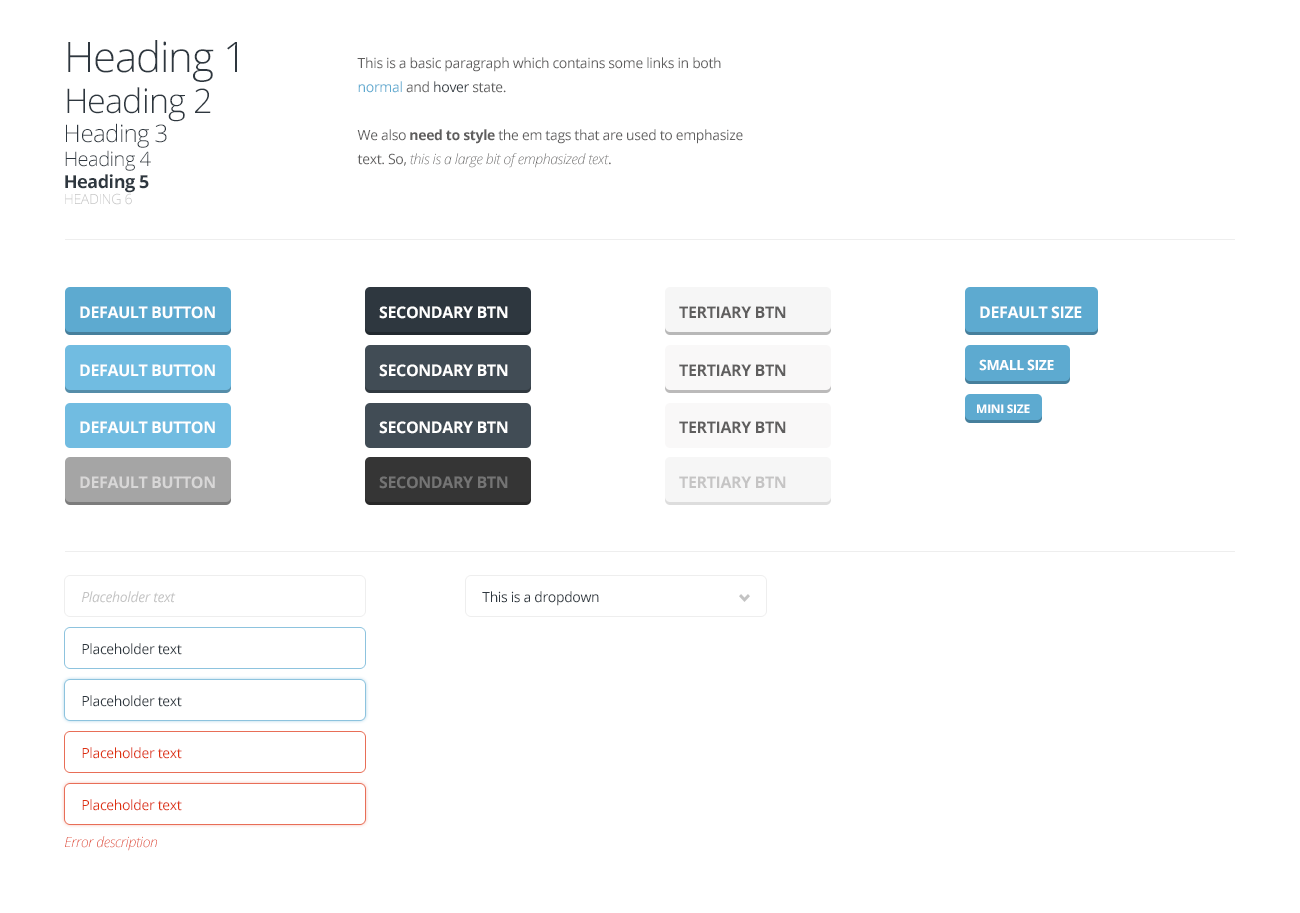
<style>
.page{position:relative;width:1300px;height:913px;background:#ffffff}
.page>*{position:absolute;margin:0}
.t1{font:42px "OpenSans-Light";letter-spacing:-0.025em;color:#2e373f}
.t2{font:34px "OpenSans-Light";letter-spacing:-0.025em;color:#2e373f}
.t3{font:24px "OpenSans-Light";letter-spacing:-0.025em;color:#2e373f}
.t4{font:20px "OpenSans-Light";letter-spacing:-0.025em;color:#2e373f}
.t5{font:18px "OpenSans-Bold";letter-spacing:-0.025em;color:#2e373f}
.t6{font:14px "OpenSans-Light";letter-spacing:-0.025em;color:#c3c3c3;text-transform:uppercase}
.t7{font:14px/24px "OpenSans";letter-spacing:-0.025em;color:#5f5e5e}
.t8{font:14px/24px "OpenSans";letter-spacing:-0.025em;color:#5daad0}
.t9{font:14px/24px "OpenSans";letter-spacing:-0.025em;color:#2e373f}
.t10{font:14px/24px "OpenSans-Bold";letter-spacing:-0.025em;color:#5f5e5e}
.t11{font:14px/24px "OpenSansLight-Italic";letter-spacing:-0.025em;color:#5f5e5e}
.t12{font:16px "OpenSans-Bold";letter-spacing:-0.025em;color:#ffffff;text-transform:uppercase}
.t13{font:16px "OpenSans-Bold";letter-spacing:-0.025em;color:#5f5e5e;text-transform:uppercase}
.t14{font:14px "OpenSans-Bold";letter-spacing:-0.025em;color:#ffffff;text-transform:uppercase}
.t15{font:12px "OpenSans-Bold";letter-spacing:-0.025em;color:#ffffff;text-transform:uppercase}
.t16{font:16px "OpenSans-Bold";letter-spacing:-0.025em;color:#d8d7d7;text-transform:uppercase}
.t17{font:16px "OpenSans-Bold";letter-spacing:-0.025em;color:#747474;text-transform:uppercase}
.t18{font:16px "OpenSans-Bold";letter-spacing:-0.025em;color:#c5c4c4;text-transform:uppercase}
.t19{font:14px "OpenSans-Italic";letter-spacing:-0.025em;color:#c3c3c3}
.t20{font:14px "OpenSans";letter-spacing:-0.025em;color:#2e373f}
.t21{font:14px "OpenSans";letter-spacing:-0.025em;color:#de310f}
.t22{font:14px "OpenSansLight-Italic";letter-spacing:-0.025em}
</style>
<div class="page">
<p class="t1" style="left:65px;top:40px;width:172px;height:165px">Heading 1<br><span class="t2">Heading 2<br></span><span class="t3">Heading 3<br></span><span class="t4">Heading 4<br></span><span class="t5">Heading 5<br></span><span class="t6">Heading 6</span></p>
<p class="t7" style="left:357px;top:57px;width:386px;height:111px">This is a basic paragraph which contains some links in both <span class="t8">normal </span>and <span class="t9">hover</span> state.<br><br>We also <span class="t10">need to style</span> the em tags that are used to emphasize text. So, <span class="t11">this is a large bit of emphasized text</span>.</p>
<p class="t12" style="left:80px;top:306px;width:135px;height:13px">Default Button</p>
<p class="t12" style="left:379px;top:306px;width:129px;height:13px">Secondary BTN</p>
<p class="t13" style="left:679px;top:306px;width:107px;height:12px">Tertiary BTN</p>
<p class="t12" style="left:980px;top:306px;width:102px;height:13px">Default Size</p>
<p class="t12" style="left:80px;top:364px;width:135px;height:13px">Default Button</p>
<p class="t12" style="left:379px;top:364px;width:129px;height:13px">Secondary BTN</p>
<p class="t13" style="left:679px;top:364px;width:107px;height:12px">Tertiary BTN</p>
<p class="t14" style="left:979px;top:359px;width:75px;height:12px">Small Size</p>
<p class="t15" style="left:977px;top:404px;width:53px;height:9px">Mini Size</p>
<p class="t12" style="left:80px;top:421px;width:135px;height:13px">Default Button</p>
<p class="t12" style="left:379px;top:421px;width:129px;height:13px">Secondary BTN</p>
<p class="t13" style="left:679px;top:421px;width:107px;height:12px">Tertiary BTN</p>
<p class="t16" style="left:80px;top:476px;width:135px;height:13px">Default Button</p>
<p class="t17" style="left:379px;top:476px;width:129px;height:13px">Secondary BTN</p>
<p class="t18" style="left:679px;top:476px;width:107px;height:12px">Tertiary BTN</p>
<p class="t19" style="left:81px;top:591px;width:95px;height:12px">Placeholder text</p>
<p class="t20" style="left:482px;top:591px;width:117px;height:15px">This is a dropdown</p>
<p class="t20" style="left:82px;top:643px;width:100px;height:12px">Placeholder text</p>
<p class="t20" style="left:82px;top:695px;width:100px;height:12px">Placeholder text</p>
<p class="t21" style="left:82px;top:747px;width:100px;height:12px">Placeholder text</p>
<p class="t21" style="left:82px;top:799px;width:100px;height:12px">Placeholder text</p>
<p class="t22" style="left:65px;top:836px;width:92px;height:15px">Error description</p>
</div>
